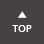
<style>
.page{position:relative;width:44px;height:44px;background:#464242}
.page>*{position:absolute;margin:0}
.t1{font:10px "NanumGothicBold";color:#ffffff;text-transform:uppercase}
</style>
<div class="page">
<p class="t1" style="left:12px;top:25px;width:20px;height:7px;rotate:-90deg">top</p>
</div>
